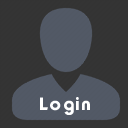
<style>
.page{position:relative;width:128px;height:128px;background:#343434}
.page>*{position:absolute;margin:0}
.t1{font:18px "TypoGraphica";letter-spacing:-0.025em;color:#ffffff}
</style>
<div class="page">
<p class="t1" style="left:40px;top:97px;width:50px;height:18px">L o g i n</p>
</div>
